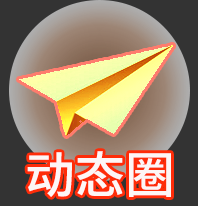
<style>
.page{position:relative;width:198px;height:206px;background:#333333}
.page>*{position:absolute;margin:0}
.t1{font:49.3px "SourceHanSansCN-Medium";color:#fdf6f6}
</style>
<div class="page">
<p class="t1" style="left:27px;top:151px;width:144px;height:46px">动态圈</p>
</div>
